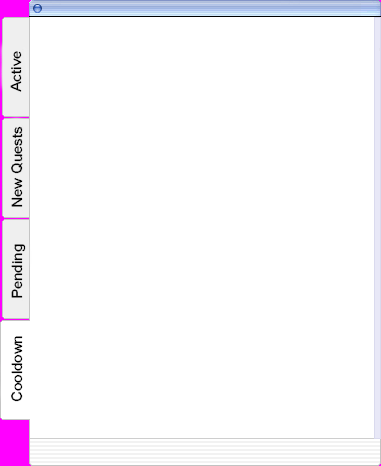
<style>
.page{position:relative;width:381px;height:466px;background:#ffffff}
.page>*{position:absolute;margin:0}
.t1{font:14.7px "MS Sans Serif";color:#000000;scale:1.03 1}
.t2{font:14.7px "MS Sans Serif";color:#000000}
</style>
<div class="page">
<p class="t1" style="left:10px;top:51px;width:12px;height:41px;rotate:-90deg">Active</p>
<p class="t2" style="left:11px;top:126px;width:12px;height:81px;rotate:-90deg">New Quests</p>
<p class="t1" style="left:11px;top:244px;width:15px;height:54px;rotate:-90deg">Pending</p>
<p class="t2" style="left:11px;top:336px;width:12px;height:66px;rotate:-90deg">Cooldown</p>
</div>
